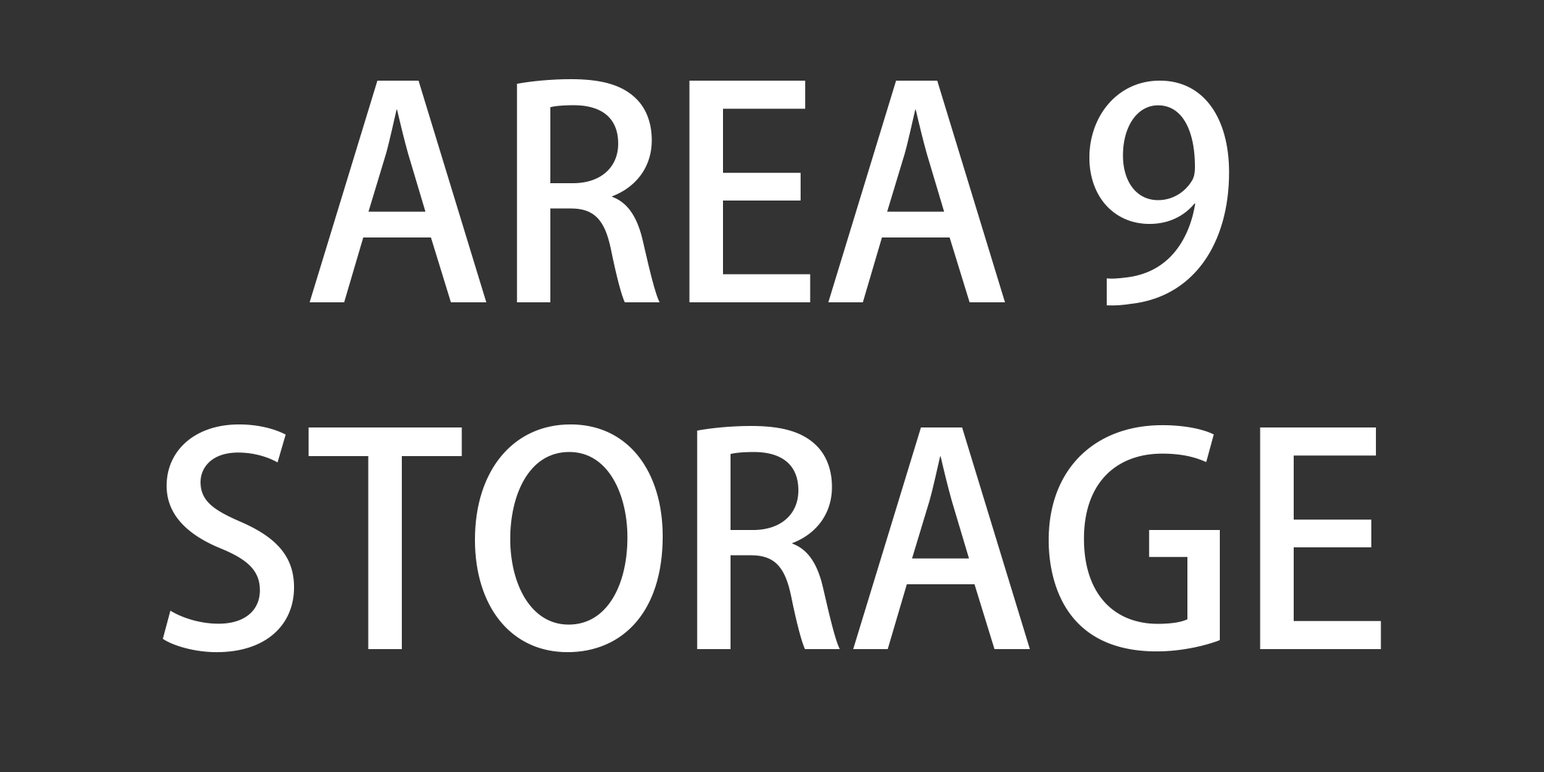
<style>
.page{position:relative;width:1544px;height:772px;background:#333333}
.page>*{position:absolute;margin:0}
.t1{font:289.6px "AdobeHeitiStd-Regular";color:#ffffff}
</style>
<div class="page">
<p class="t1" style="left:163px;top:79px;width:1218px;height:574px;text-align:center">AREA 9<br>STORAGE</p>
</div>
